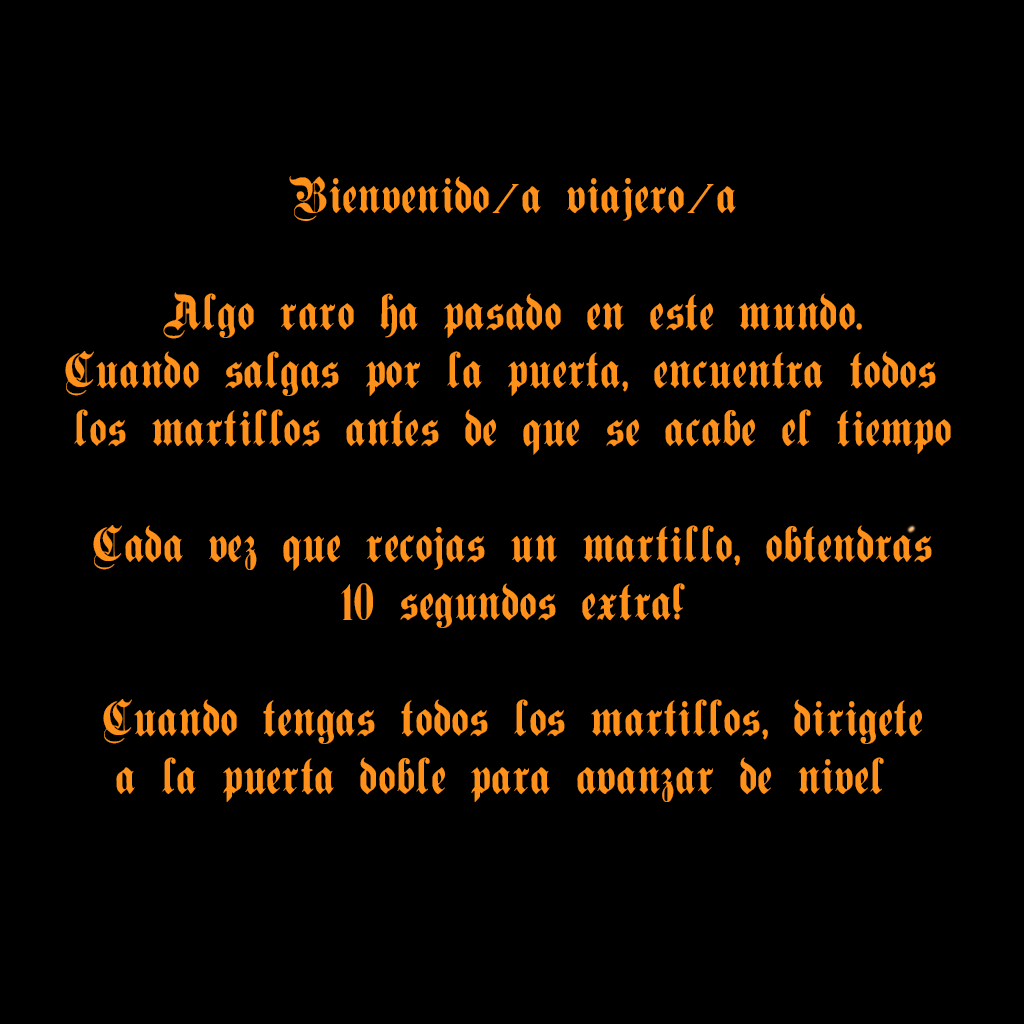
<style>
.page{position:relative;width:1024px;height:1024px;background:#000000}
.page>*{position:absolute;margin:0}
.t1{font:44.3px/58px "PlainGermanica";letter-spacing:0.04em;color:#ff911a;scale:0.93 1}
.t2{font:44.3px/58px "CopperplateGothic-Light";letter-spacing:0.04em;color:#ff911a;scale:0.93 1}
</style>
<div class="page">
<p class="t1" style="left:65px;top:176px;width:886px;height:626px;text-align:center">Bienvenido<span class="t2">/</span>a viajero<span class="t2">/</span>a<br><br>Algo raro ha pasado en este mundo.<br>Cuando salgas por la puerta, encuentra todos <br>los martillos antes de que se acabe el tiempo<br><br>Cada vez que recojas un martillo, obtendras<br>10 segundos extra!<br><br>Cuando tengas todos los martillos, dirigete<br>a la puerta doble para avanzar de nivel</p>
</div>
